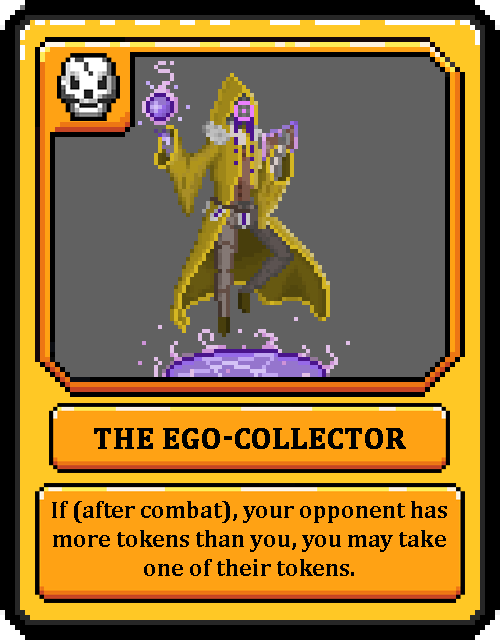
<style>
.page{position:relative;width:500px;height:640px;background:#616161}
.page>*{position:absolute;margin:0}
.t1{font:30px "Cambria-Bold";color:#000000;text-transform:uppercase;font-weight:bold}
.t2{font:24px "Cambria-Bold";color:#000000}
</style>
<div class="page">
<p class="t1" style="left:94px;top:428px;width:312px;height:21px">The Ego-Collector</p>
<p class="t2" style="left:52px;top:501px;width:395px;height:75px;text-align:center">If (after combat), your opponent has  more tokens than you, you may take one of their tokens.</p>
</div>
